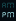
<style>
.page{position:relative;width:16px;height:21px;background:#050b11}
.page>*{position:absolute;margin:0}
.t1{font:8px "QuartzMS";color:#17545a}
.t2{font:8px "QuartzMS"}
</style>
<div class="page">
<p class="t1" style="left:2px;top:2px;width:12px;height:6px">am</p>
<p class="t2" style="left:2px;top:12px;width:12px;height:6px">pm</p>
</div>
